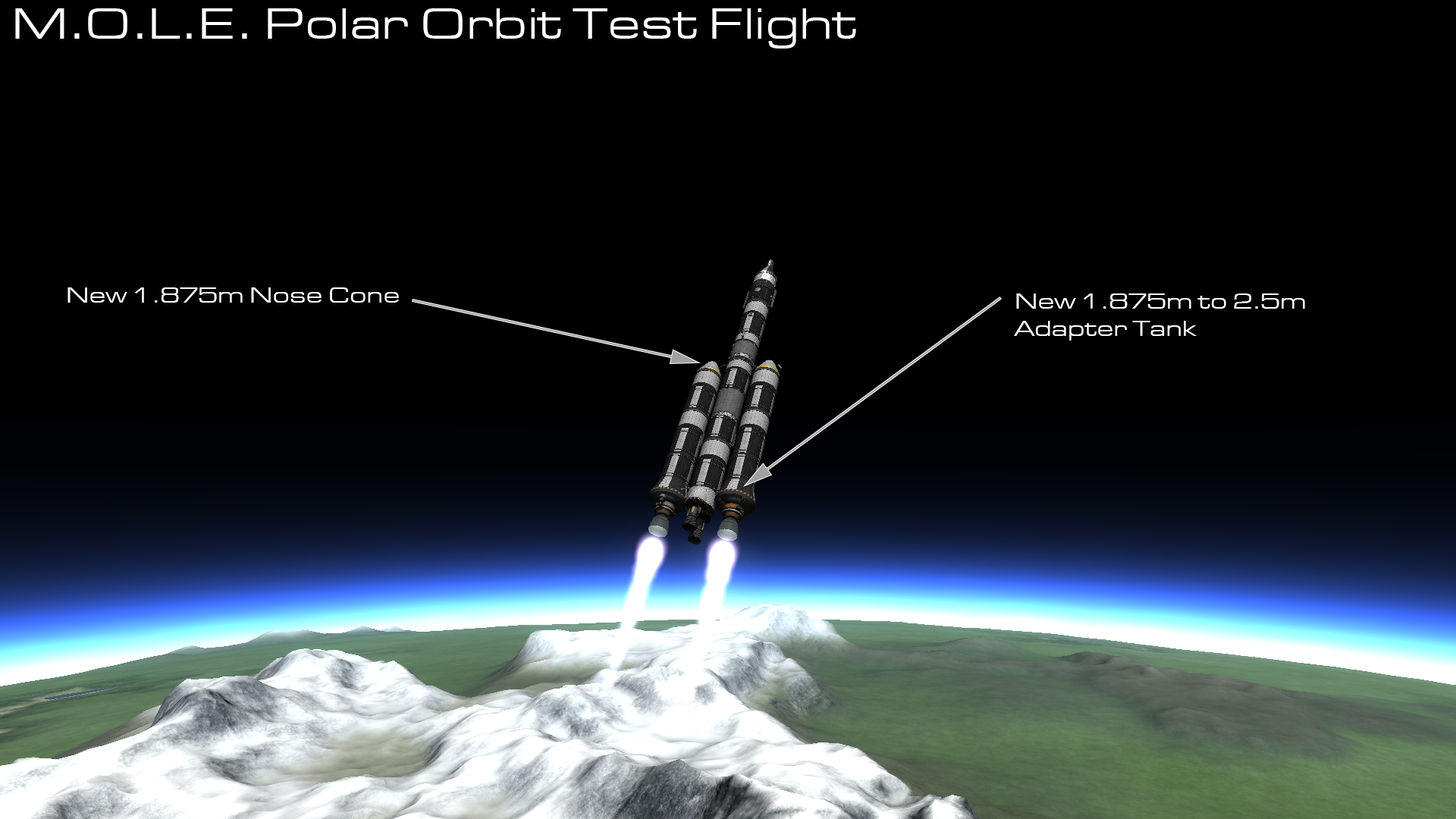
<style>
.page{position:relative;width:1456px;height:819px;background:#000000}
.page>*{position:absolute;margin:0}
.t1{font:45.5px "EurostileExtended-Roman";color:#ffffff}
.t2{font:22.7px "EurostileExtended-Roman";color:#ffffff}
</style>
<div class="page">
<p class="t1" style="left:15px;top:8px;width:841px;height:41px">M.O.L.E. Polar Orbit Test Flight</p>
<p class="t2" style="left:67px;top:287px;width:332px;height:16px">New 1.875m Nose Cone</p>
<p class="t2" style="left:1014px;top:293px;width:291px;height:47px">New 1.875m to 2.5m<br>Adapter Tank</p>
</div>
